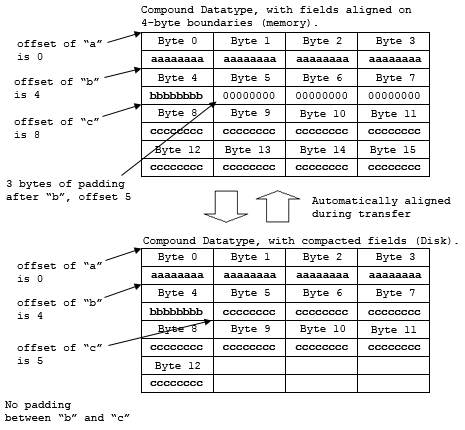
<style>
.page{position:relative;width:465px;height:430px;background:#ffffff}
.page>*{position:absolute;margin:0}
.t1{font:11px "CourierNewPSMT";color:#000000}
.t2{font:11px "CourierNewPS-BoldMT";color:#000000}
</style>
<div class="page">
<p class="t1" style="left:141px;top:6px;width:271px;height:22px">Compound Datatype, with fields aligned on <br>4-byte boundaries (memory).</p>
<p class="t1" style="left:17px;top:40px;width:85px;height:20px">offset of “a”<br>is 0</p>
<p class="t1" style="left:158px;top:37px;width:39px;height:9px">Byte 0</p>
<p class="t1" style="left:231px;top:37px;width:39px;height:9px">Byte 1</p>
<p class="t1" style="left:303px;top:37px;width:39px;height:9px">Byte 2</p>
<p class="t1" style="left:376px;top:37px;width:39px;height:9px">Byte 3</p>
<p class="t2" style="left:151px;top:57px;width:271px;height:5px">aaaaaaaa   aaaaaaaa   aaaaaaaa   aaaaaaaa</p>
<p class="t1" style="left:14px;top:78px;width:85px;height:20px">offset of “b”<br>is 4</p>
<p class="t1" style="left:158px;top:74px;width:39px;height:9px">Byte 4</p>
<p class="t1" style="left:231px;top:74px;width:39px;height:9px">Byte 5</p>
<p class="t1" style="left:303px;top:74px;width:39px;height:9px">Byte 6</p>
<p class="t1" style="left:376px;top:74px;width:39px;height:9px">Byte 7</p>
<p class="t1" style="left:149px;top:92px;width:271px;height:7px"><span class="t2">bbbbbbbb   </span>00000000   00000000   00000000</p>
<p class="t1" style="left:158px;top:109px;width:39px;height:9px">Byte 8</p>
<p class="t1" style="left:231px;top:109px;width:39px;height:9px">Byte 9</p>
<p class="t1" style="left:300px;top:110px;width:45px;height:9px">Byte 10</p>
<p class="t1" style="left:371px;top:110px;width:45px;height:9px">Byte 11</p>
<p class="t1" style="left:14px;top:118px;width:85px;height:20px">offset of “c”<br>is 8</p>
<p class="t2" style="left:150px;top:129px;width:271px;height:5px">cccccccc   cccccccc   cccccccc   cccccccc</p>
<p class="t1" style="left:155px;top:146px;width:45px;height:9px">Byte 12</p>
<p class="t1" style="left:225px;top:146px;width:46px;height:9px">Byte 13</p>
<p class="t1" style="left:300px;top:146px;width:45px;height:9px">Byte 14</p>
<p class="t1" style="left:370px;top:146px;width:46px;height:9px">Byte 15</p>
<p class="t2" style="left:150px;top:165px;width:271px;height:5px">cccccccc   cccccccc   cccccccc   cccccccc</p>
<p class="t1" style="left:6px;top:180px;width:125px;height:22px">3 bytes of padding<br>after “b”, offset 5</p>
<p class="t1" style="left:312px;top:197px;width:139px;height:22px">Automatically aligned<br>during transfer</p>
<p class="t1" style="left:143px;top:237px;width:315px;height:9px">Compound Datatype, with compacted fields (Disk).</p>
<p class="t1" style="left:158px;top:253px;width:39px;height:9px">Byte 0</p>
<p class="t1" style="left:231px;top:253px;width:39px;height:9px">Byte 1</p>
<p class="t1" style="left:303px;top:253px;width:39px;height:9px">Byte 2</p>
<p class="t1" style="left:376px;top:253px;width:39px;height:9px">Byte 3</p>
<p class="t1" style="left:17px;top:262px;width:85px;height:20px">offset of “a”<br>is 0</p>
<p class="t2" style="left:151px;top:273px;width:271px;height:5px">aaaaaaaa   aaaaaaaa   aaaaaaaa   aaaaaaaa</p>
<p class="t1" style="left:158px;top:289px;width:39px;height:9px">Byte 4</p>
<p class="t1" style="left:231px;top:289px;width:39px;height:9px">Byte 5</p>
<p class="t1" style="left:303px;top:289px;width:39px;height:9px">Byte 6</p>
<p class="t1" style="left:376px;top:289px;width:39px;height:9px">Byte 7</p>
<p class="t1" style="left:17px;top:299px;width:85px;height:20px">offset of “b”<br>is 4</p>
<p class="t2" style="left:149px;top:308px;width:272px;height:7px">bbbbbbbb   cccccccc   cccccccc   cccccccc</p>
<p class="t1" style="left:158px;top:325px;width:39px;height:9px">Byte 8</p>
<p class="t1" style="left:231px;top:325px;width:39px;height:9px">Byte 9</p>
<p class="t1" style="left:300px;top:325px;width:45px;height:9px">Byte 10</p>
<p class="t1" style="left:371px;top:326px;width:45px;height:9px">Byte 11</p>
<p class="t1" style="left:17px;top:344px;width:85px;height:20px">offset of “c”<br>is 5</p>
<p class="t2" style="left:150px;top:345px;width:271px;height:5px">cccccccc   cccccccc   cccccccc   cccccccc</p>
<p class="t1" style="left:155px;top:362px;width:45px;height:9px">Byte 12</p>
<p class="t2" style="left:150px;top:381px;width:53px;height:5px">cccccccc</p>
<p class="t1" style="left:5px;top:401px;width:125px;height:20px">No padding<br>between “b” and “c”</p>
</div>
